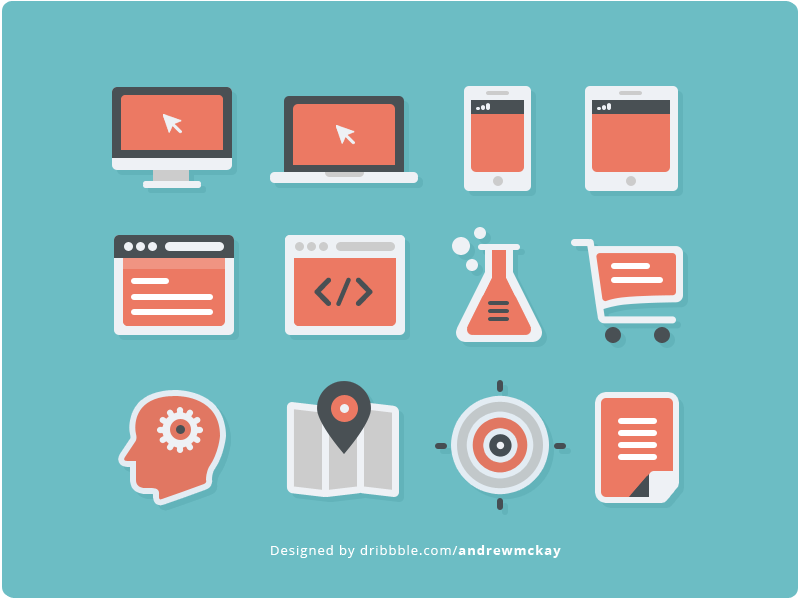
<style>
.page{position:relative;width:800px;height:600px;background:#6cbdc4}
.page>*{position:absolute;margin:0}
.t1{font:13px "OpenSans";letter-spacing:0.075em;color:#ffffff}
.t2{font:13px "OpenSans-Bold";letter-spacing:0.075em;color:#ffffff}
</style>
<div class="page">
<p class="t1" style="left:271px;top:545px;width:290px;height:13px">Designed by dribbble.com/<span class="t2">andrewmckay</span></p>
</div>
